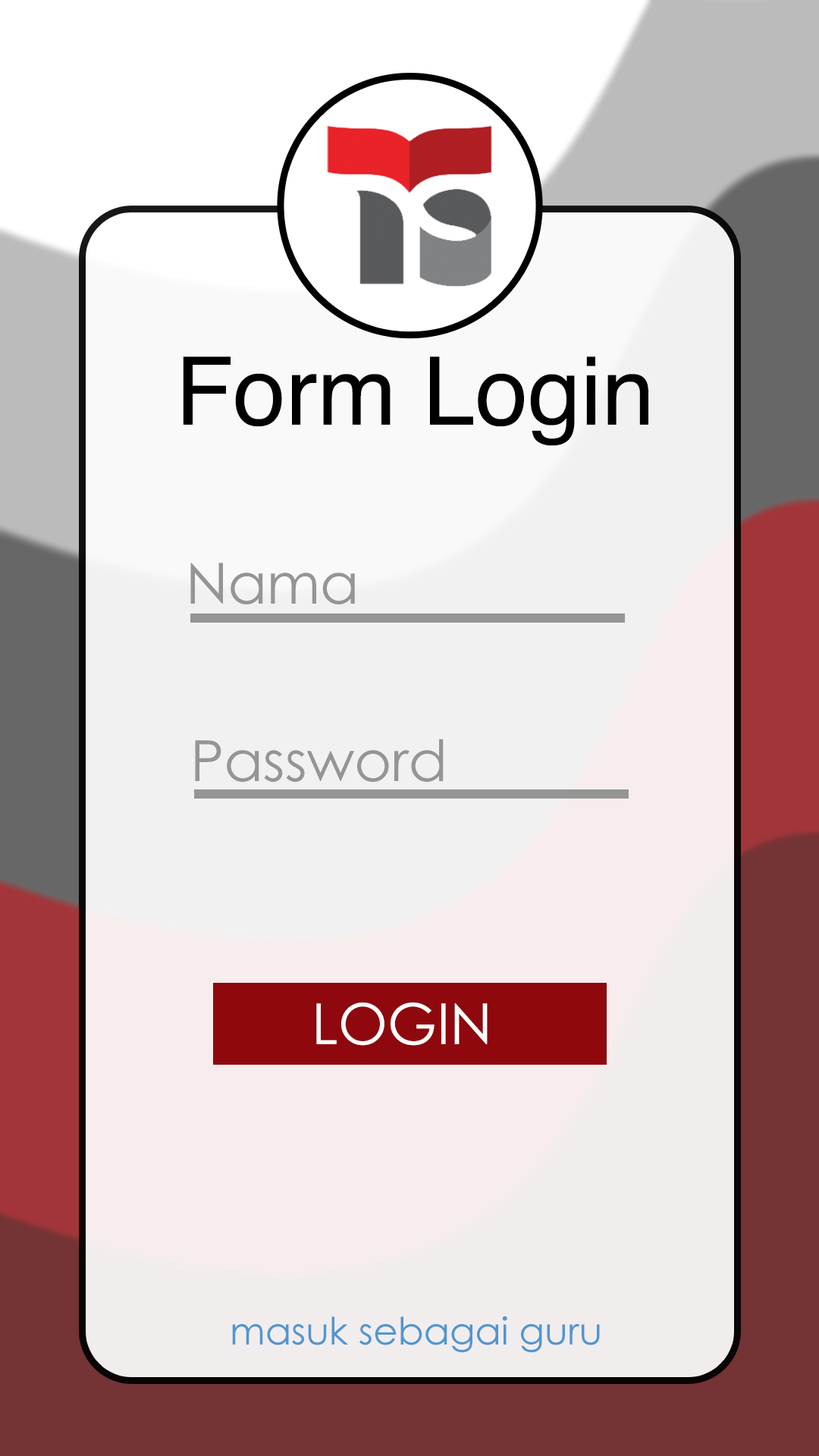
<style>
.page{position:relative;width:819px;height:1456px}
.page>*{position:absolute;margin:0}
.t1{font:94.8px "Helvetica";color:#000000}
.t2{font:56.9px "CenturyGothic";color:#959595}
.t3{font:56.9px "CenturyGothic";color:#ffffff}
.t4{font:37.9px "CenturyGothic";color:#5096d1}
</style>
<div class="page">
<p class="t1" style="left:183px;top:356px;width:465px;height:90px">Form Login</p>
<p class="t2" style="left:190px;top:563px;width:165px;height:41px">Nama</p>
<p class="t2" style="left:195px;top:739px;width:249px;height:43px">Password</p>
<p class="t3" style="left:316px;top:1003px;width:172px;height:43px">LOGIN</p>
<p class="t4" style="left:232px;top:1316px;width:368px;height:37px">masuk sebagai guru</p>
</div>
